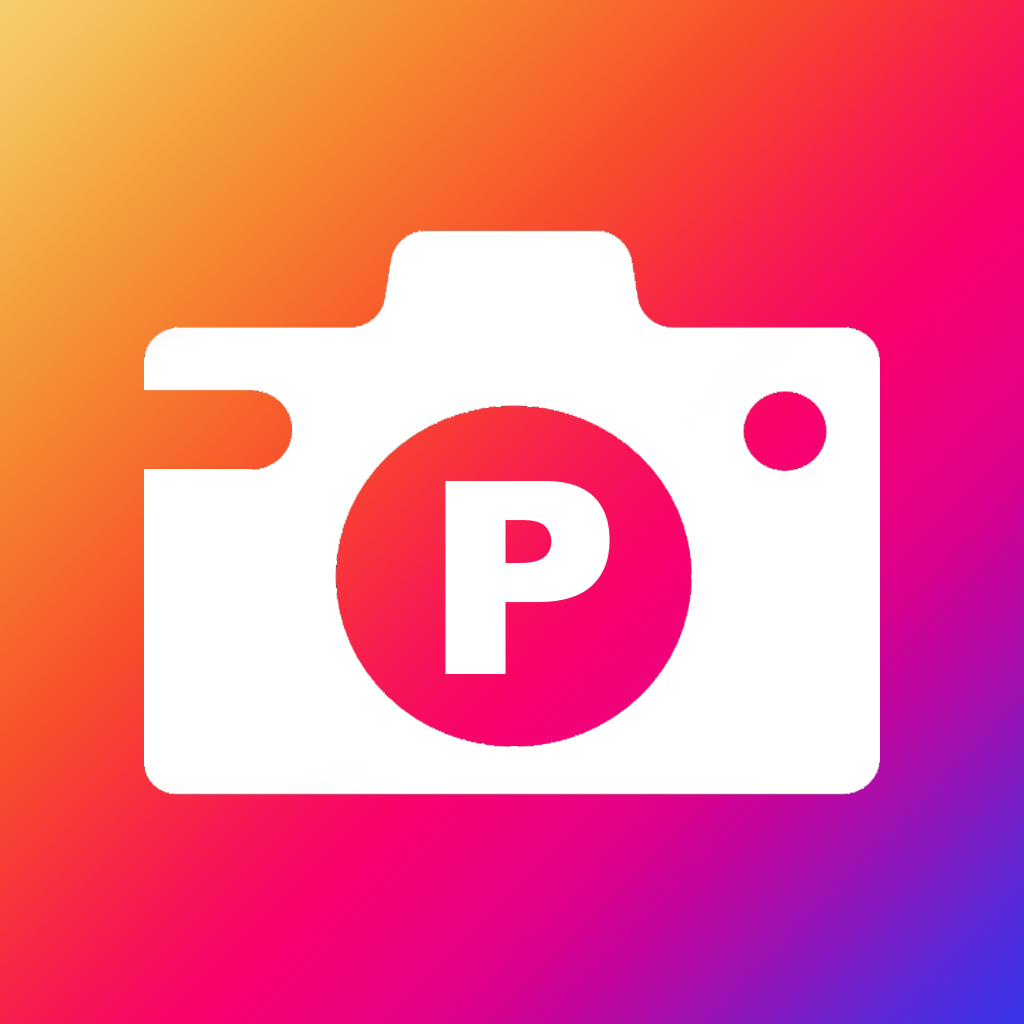
<style>
.page{position:relative;width:1024px;height:1024px;background:#ffffff}
.page>*{position:absolute;margin:0}
.t1{font:270px "Arial-Black";color:#ffffff}
</style>
<div class="page">
<p class="t1" style="left:445px;top:481px;width:165px;height:193px">P</p>
</div>
